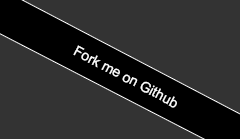
<style>
.page{position:relative;width:240px;height:139px;background:#333333}
.page>*{position:absolute;margin:0}
.t1{font:14px "ArialMT";color:#ffffff}
</style>
<div class="page">
<p class="t1" style="left:73px;top:45px;width:104px;height:63px;rotate:28deg">Fork me on Github</p>
</div>
